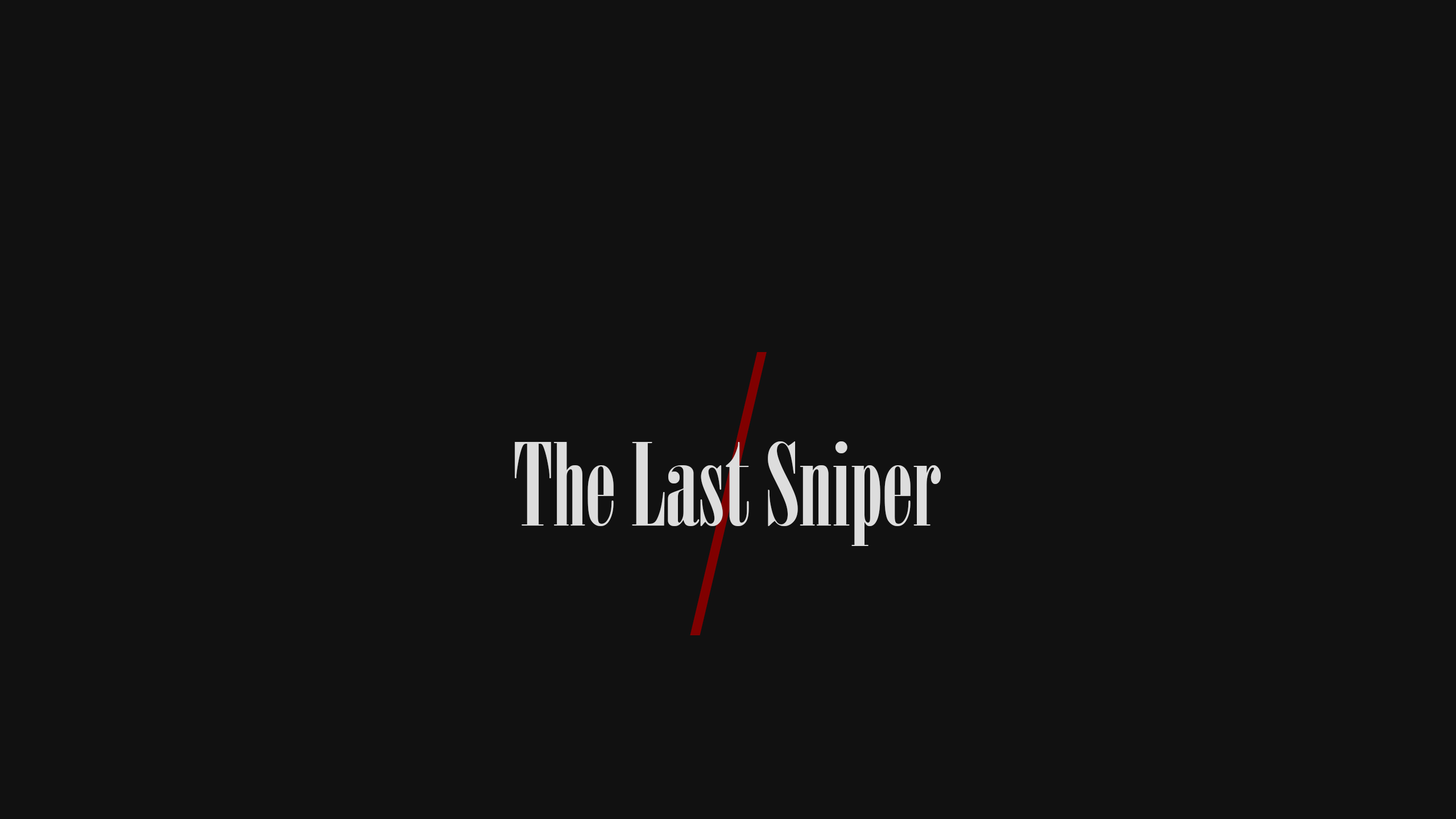
<style>
.page{position:relative;width:1456px;height:819px;background:#111111}
.page>*{position:absolute;margin:0}
.t1{font:379.2px "Onyx";color:#800000}
.t2{font:113.7px "Onyx";color:#dddddd}
</style>
<div class="page">
<p class="t1" style="left:690px;top:352px;width:77px;height:283px">/</p>
<p class="t2" style="left:515px;top:441px;width:426px;height:105px">The Last Sniper</p>
</div>
